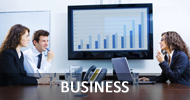
<style>
.page{position:relative;width:190px;height:100px}
.page>*{position:absolute;margin:0}
.t1{font:16.7px "Calibri";color:#ffffff;font-weight:bold}
</style>
<div class="page">
<p class="t1" style="left:61px;top:81px;width:68px;height:12px">BUSINESS</p>
</div>
